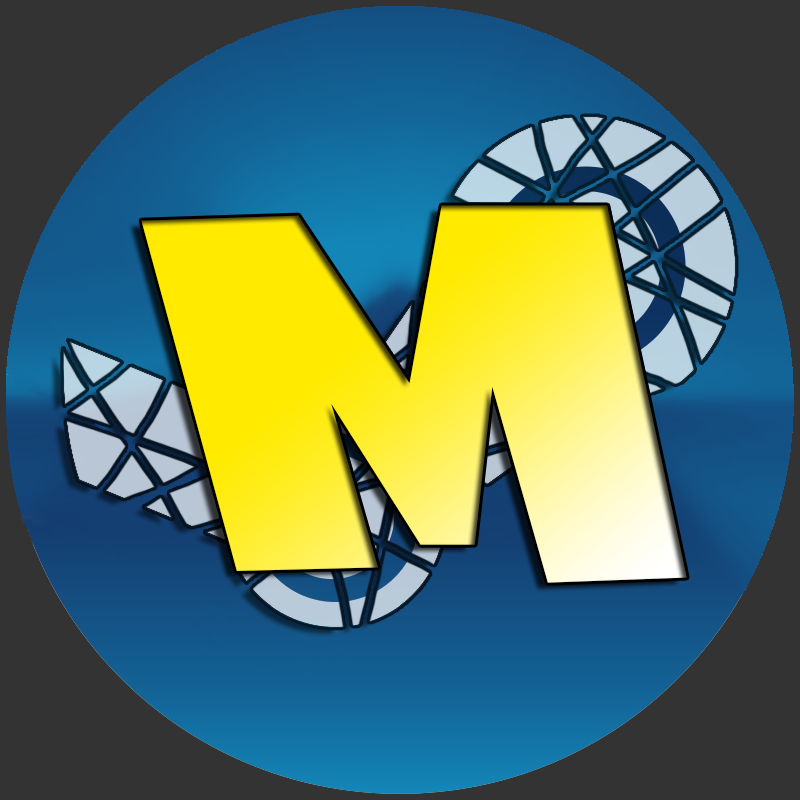
<style>
.page{position:relative;width:800px;height:800px;background:#333333}
.page>*{position:absolute;margin:0}
.t1{font:540px "LuckiestGuy-Regular";text-transform:uppercase;scale:1.17 1}
</style>
<div class="page">
<p class="t1" style="left:141px;top:205px;width:546px;height:378px">M</p>
</div>
